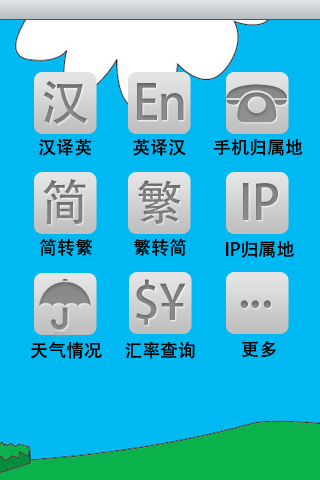
<style>
.page{position:relative;width:320px;height:480px;background:#00b9f2}
.page>*{position:absolute;margin:0}
.t1{font:18px "AdobeHeitiStd-Regular";color:#000000}
</style>
<div class="page">
<p class="t1" style="left:39px;top:139px;width:52px;height:17px">汉译英</p>
<p class="t1" style="left:133px;top:139px;width:53px;height:17px">英译汉</p>
<p class="t1" style="left:213px;top:138px;width:90px;height:18px">手机归属地</p>
<p class="t1" style="left:40px;top:238px;width:52px;height:19px">简转繁</p>
<p class="t1" style="left:134px;top:238px;width:52px;height:19px">繁转简</p>
<p class="t1" style="left:226px;top:240px;width:68px;height:18px">IP归属地</p>
<p class="t1" style="left:31px;top:341px;width:71px;height:18px">天气情况</p>
<p class="t1" style="left:125px;top:341px;width:70px;height:18px">汇率查询</p>
<p class="t1" style="left:242px;top:341px;width:34px;height:17px">更多</p>
</div>
